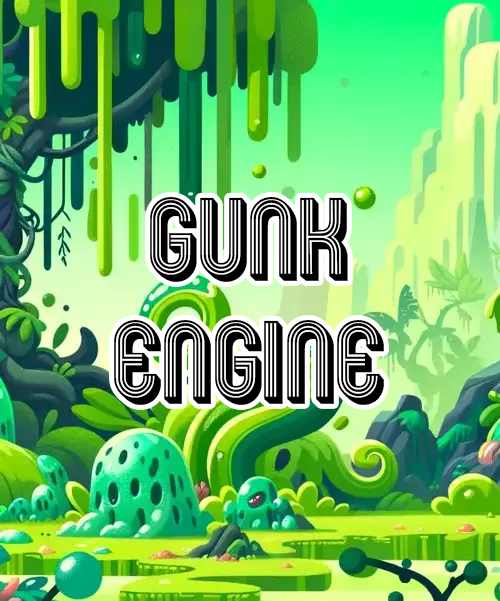
<style>
.page{position:relative;width:500px;height:601px}
.page>*{position:absolute;margin:0}
.t1{font:102.2px "Mexcellent3D-Regular";color:#000000;scale:0.9 1}
</style>
<div class="page">
<p class="t1" style="left:114px;top:196px;width:270px;height:209px;text-align:center">Gunk<br>Engine</p>
</div>
